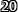
<style>
.page{position:relative;width:18px;height:12px;background:#ffffff}
.page>*{position:absolute;margin:0}
.t1{font:17px "Perpetua-Bold";color:#ffffff}
</style>
<div class="page">
<p class="t1" style="left:1px;top:1px;width:16px;height:10px">20</p>
</div>
